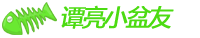
<style>
.page{position:relative;width:200px;height:38px;background:#ffffff}
.page>*{position:absolute;margin:0}
.t1{font:23.1px "MicrosoftYaHei";letter-spacing:-0.075em;color:#4cdb12;text-transform:uppercase;font-weight:bold;font-style:italic}
</style>
<div class="page">
<p class="t1" style="left:61px;top:5px;width:113px;height:24px">谭亮小盆友</p>
</div>
